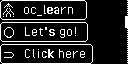
<style>
.page{position:relative;width:128px;height:64px;background:#000000}
.page>*{position:absolute;margin:0}
.t1{font:16px "PixelOperator";color:#ffffff}
</style>
<div class="page">
<p class="t1" style="left:23px;top:5px;width:51px;height:11px">oc_learn</p>
<p class="t1" style="left:24px;top:27px;width:53px;height:11px">Let's go!</p>
<p class="t1" style="left:24px;top:49px;width:61px;height:9px">Click here</p>
</div>
